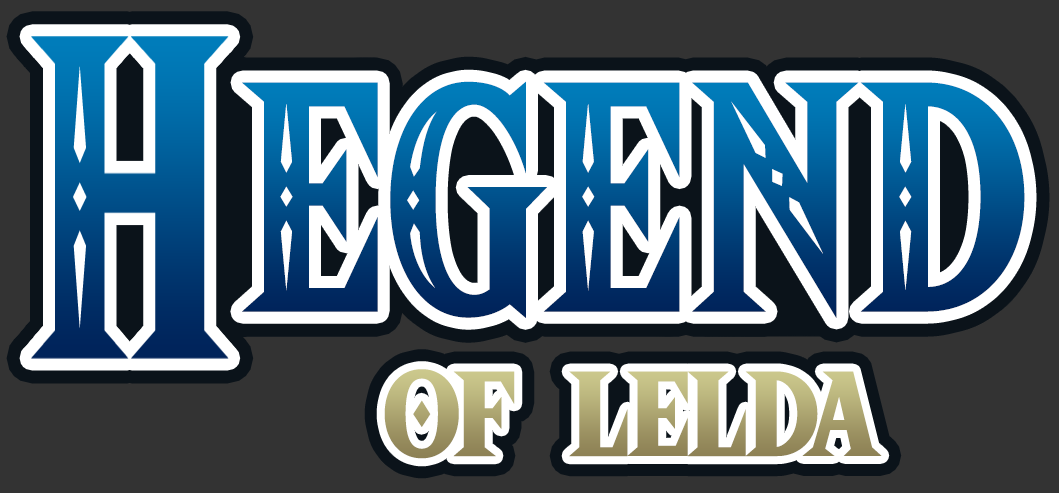
<style>
.page{position:relative;width:1059px;height:493px;background:#333333}
.page>*{position:absolute;margin:0}
.t1{font:286.3px "HyliaSerifBeta-Regular";letter-spacing:-0.012em;scale:0.86 1}
.t2{font:280px "HyliaSerifBeta-Regular";letter-spacing:-0.012em;scale:0.86 1}
.t3{font:140px "HyliaSerifBeta-Regular";letter-spacing:-0.05em}
</style>
<div class="page">
<p class="t1" style="left:242px;top:81px;width:783px;height:237px">E<span class="t2">G</span>END</p>
<p class="t3" style="left:384px;top:369px;width:498px;height:90px">of  lelda</p>
</div>
